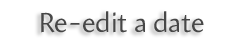
<style>
.page{position:relative;width:246px;height:48px;background:#ffffff}
.page>*{position:absolute;margin:0}
.t1{font:28px "Amira-Roman";color:#474747}
</style>
<div class="page">
<p class="t1" style="left:41px;top:11px;width:163px;height:22px">Re-edit a date</p>
</div>
